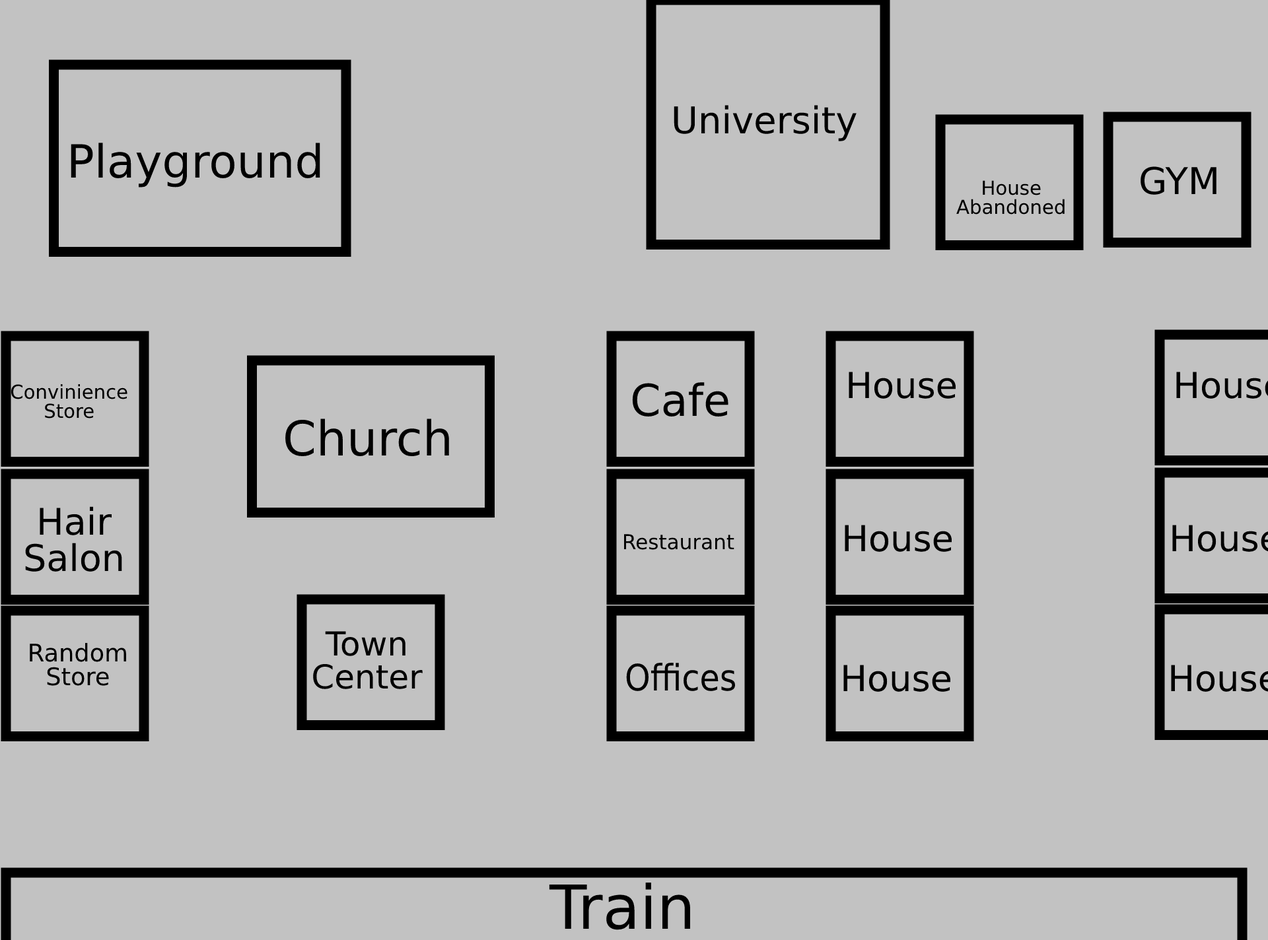
<style>
.page{position:relative;width:1268px;height:940px;background:#c2c2c2}
.page>*{position:absolute;margin:0}
.t1{font:37px "DejaVuSans";color:#000000}
.t2{font:45.7px "DejaVuSans";color:#000000}
.t3{font:19.3px "DejaVuSans";color:#000000}
.t4{font:35.8px "DejaVuSans";color:#000000}
.t5{font:19.2px "DejaVuSans";color:#000000}
.t6{font:44px "DejaVuSans";color:#000000}
.t7{font:48.2px "DejaVuSans";color:#000000}
.t8{font:36.7px "DejaVuSans";color:#000000}
.t9{font:20.5px "DejaVuSans";color:#000000}
.t10{font:33px "DejaVuSans";color:#000000}
.t11{font:24.3px "DejaVuSans";color:#000000}
.t12{font:36.4px "DejaVuSans";color:#000000;scale:0.89 1}
.t13{font:60.8px "DejaVuSans";color:#000000}
</style>
<div class="page">
<p class="t1" style="left:674px;top:105px;width:183px;height:36px">University</p>
<p class="t2" style="left:71px;top:143px;width:249px;height:45px">Playground</p>
<p class="t1" style="left:1141px;top:166px;width:75px;height:29px">GYM</p>
<p class="t3" style="left:956px;top:180px;width:109px;height:35px;text-align:center">House<br>Abandoned</p>
<p class="t4" style="left:849px;top:372px;width:107px;height:27px">House</p>
<p class="t5" style="left:11px;top:384px;width:116px;height:35px;text-align:center">Convinience<br>Store</p>
<p class="t6" style="left:632px;top:382px;width:96px;height:35px">Cafe</p>
<p class="t7" style="left:285px;top:419px;width:164px;height:38px">Church</p>
<p class="t8" style="left:25px;top:507px;width:97px;height:65px;text-align:center">Hair<br>Salon</p>
<p class="t4" style="left:845px;top:525px;width:107px;height:27px">House</p>
<p class="t9" style="left:624px;top:534px;width:110px;height:16px">Restaurant</p>
<p class="t10" style="left:313px;top:631px;width:110px;height:58px;text-align:center">Town<br>Center</p>
<p class="t11" style="left:30px;top:643px;width:96px;height:43px;text-align:center">Random<br>Store</p>
<p class="t12" style="left:626px;top:663px;width:110px;height:28px">Offices</p>
<p class="t4" style="left:843px;top:665px;width:108px;height:27px">House</p>
<p class="t13" style="left:549px;top:883px;width:142px;height:48px">Train</p>
</div>
